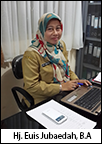
<style>
.page{position:relative;width:102px;height:144px}
.page>*{position:absolute;margin:0}
.t1{font:9.2px "MyriadPro-Regular";color:#000000;scale:0.94 1}
</style>
<div class="page">
<p class="t1" style="left:13px;top:132px;width:79px;height:9px">Hj. Euis Jubaedah, B.A</p>
</div>
